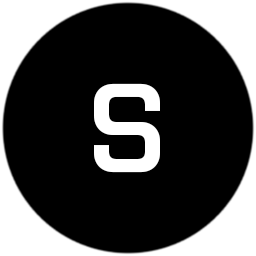
<style>
.page{position:relative;width:256px;height:256px;background:#000000}
.page>*{position:absolute;margin:0}
.t1{font:125px "Purista-SemiBold";color:#ffffff}
</style>
<div class="page">
<p class="t1" style="left:94px;top:83px;width:66px;height:90px">S</p>
</div>
